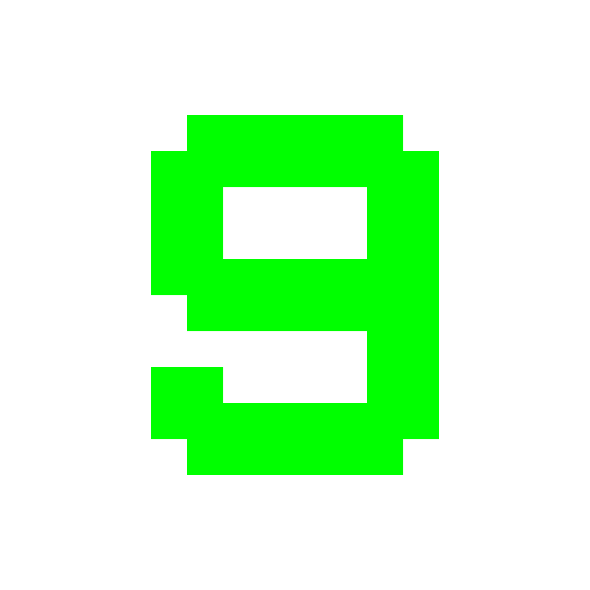
<style>
.page{position:relative;width:590px;height:590px;background:#ffffff}
.page>*{position:absolute;margin:0}
.t1{font:720px "SmallPixel-7";color:#00ff00}
</style>
<div class="page">
<p class="t1" style="left:151px;top:115px;width:288px;height:360px">9</p>
</div>
